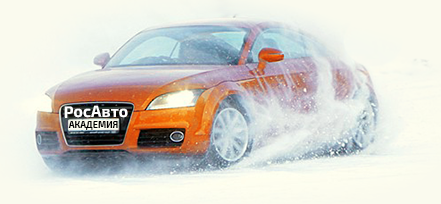
<style>
.page{position:relative;width:441px;height:204px}
.page>*{position:absolute;margin:0}
.t1{font:16px "Exo2-Bold";color:#ffffff}
.t2{font:9px "Exo2-Bold";color:#000000}
</style>
<div class="page">
<p class="t1" style="left:64px;top:105px;width:64px;height:13px;rotate:-1deg">РосАвто</p>
<p class="t2" style="left:68px;top:121px;width:50px;height:9px">АКАДЕМИЯ</p>
</div>
